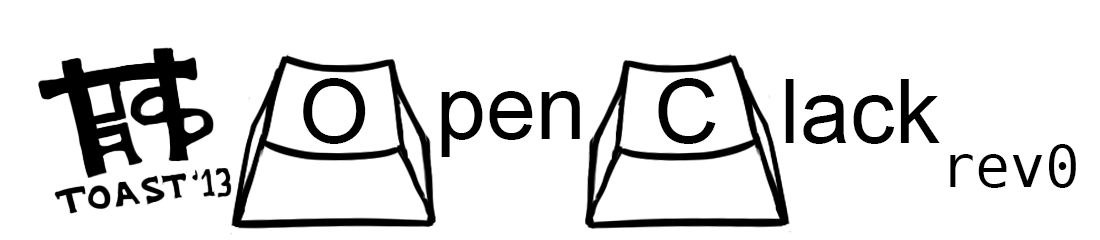
<style>
.page{position:relative;width:1100px;height:240px;background:#ffffff}
.page>*{position:absolute;margin:0}
.t1{font:100px "Miriam";color:#000000}
.t2{font:58.3px "BitstreamVeraSansMono-Roman";color:#000000}
</style>
<div class="page">
<p class="t1" style="left:303px;top:78px;width:63px;height:66px">O</p>
<p class="t1" style="left:658px;top:78px;width:58px;height:66px">C</p>
<p class="t1" style="left:785px;top:79px;width:155px;height:65px">lack</p>
<p class="t1" style="left:441px;top:91px;width:139px;height:66px">pen</p>
<p class="t2" style="left:950px;top:144px;width:126px;height:44px">rev0</p>
</div>
